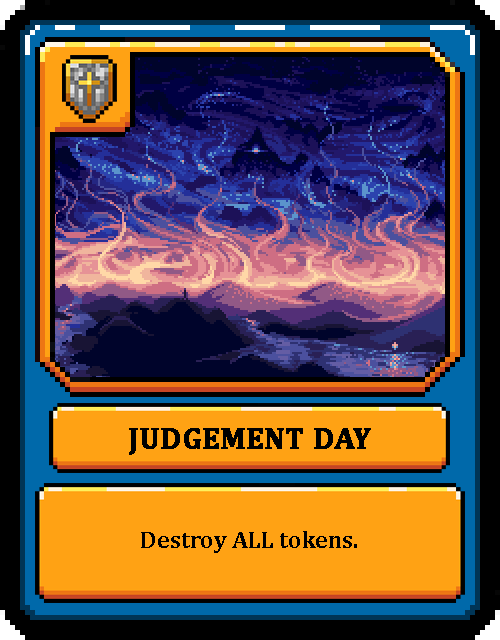
<style>
.page{position:relative;width:500px;height:640px;background:#000000}
.page>*{position:absolute;margin:0}
.t1{font:30px "Cambria-Bold";color:#000000;text-transform:uppercase;font-weight:bold}
.t2{font:24px "Cambria-Bold";color:#000000}
</style>
<div class="page">
<p class="t1" style="left:129px;top:428px;width:242px;height:27px">Judgement Day</p>
<p class="t2" style="left:141px;top:531px;width:216px;height:22px">Destroy ALL tokens.</p>
</div>
